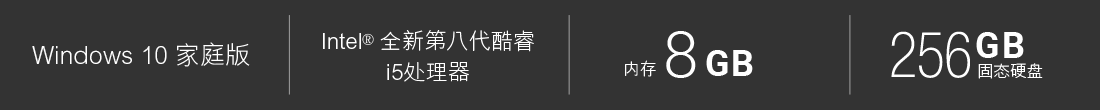
<style>
.page{position:relative;width:1100px;height:110px;background:#333333}
.page>*{position:absolute;margin:0}
.t1{font:22.2px/30.6px "MHeiHKS-Light";color:#ffffff}
.t2{font:22.2px/30.6px "DFKaiShu-SB-Estd-BF";color:#ffffff}
.t3{font:25px "MHeiHKS-Light";color:#ffffff}
.t4{font:16.7px "MHeiHKS-Light";color:#ffffff}
</style>
<div class="page">
<p class="t1" style="left:323px;top:30px;width:211px;height:52px;text-align:center">Intel<span class="t2">®</span> 全新第八代酷睿<br>i5處理器</p>
<p class="t3" style="left:32px;top:42px;width:218px;height:25px">Windows 10 家庭版</p>
<p class="t4" style="left:625px;top:60px;width:31px;height:17px">內存</p>
<p class="t4" style="left:978px;top:63px;width:65px;height:16px">固態硬盤</p>
</div>
